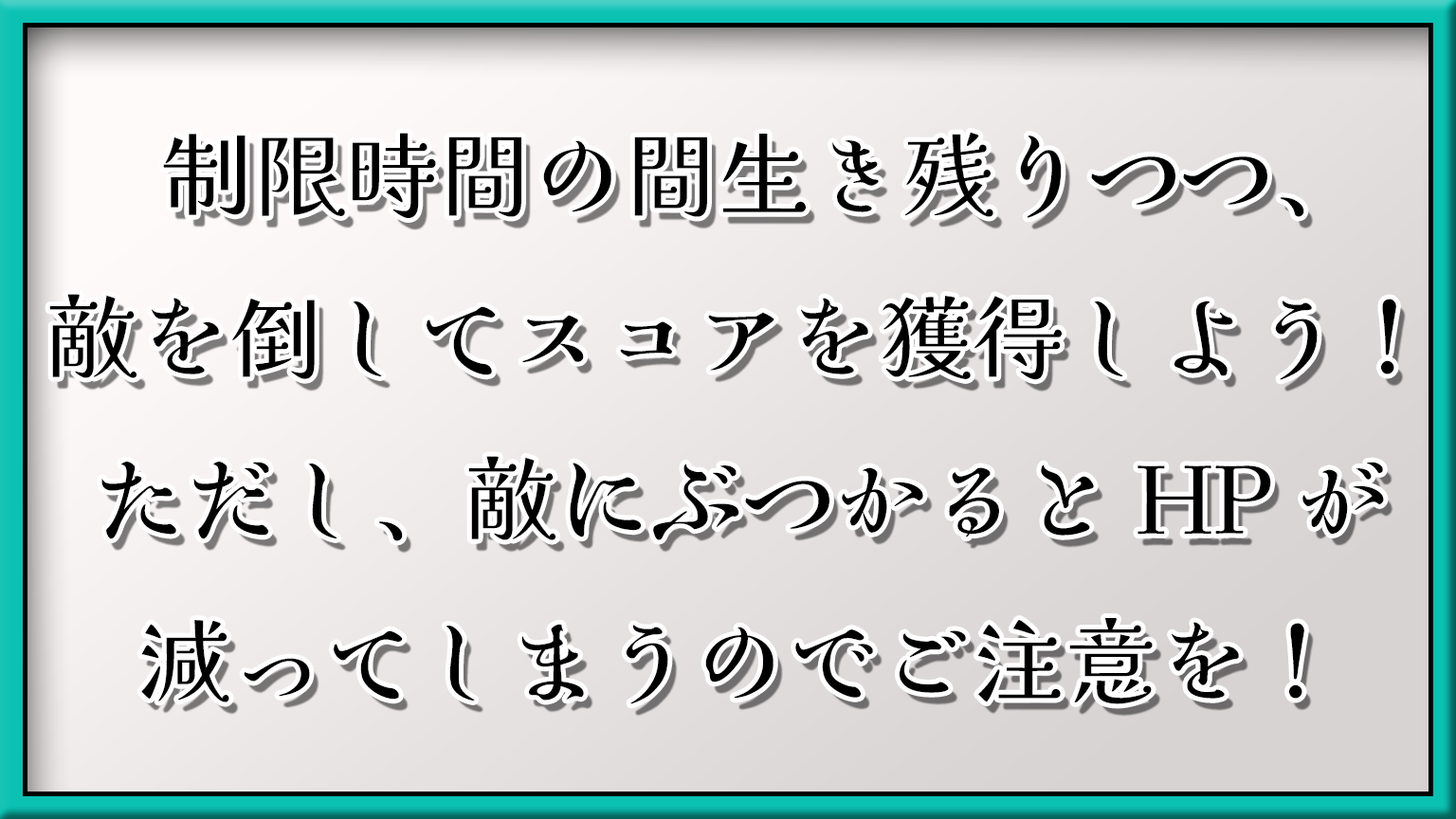
<style>
.page{position:relative;width:1456px;height:819px}
.page>*{position:absolute;margin:0}
.t1{font:92.7px "KaiseiHarunoUmi-Regular";color:#000000}
</style>
<div class="page">
<p class="t1" style="left:49px;top:132px;width:1347px;height:572px;text-align:center">制限時間の間生き残りつつ、<br>敵を倒してスコアを獲得しよう！<br>ただし、敵にぶつかるとHPが<br>減ってしまうのでご注意を！</p>
</div>
